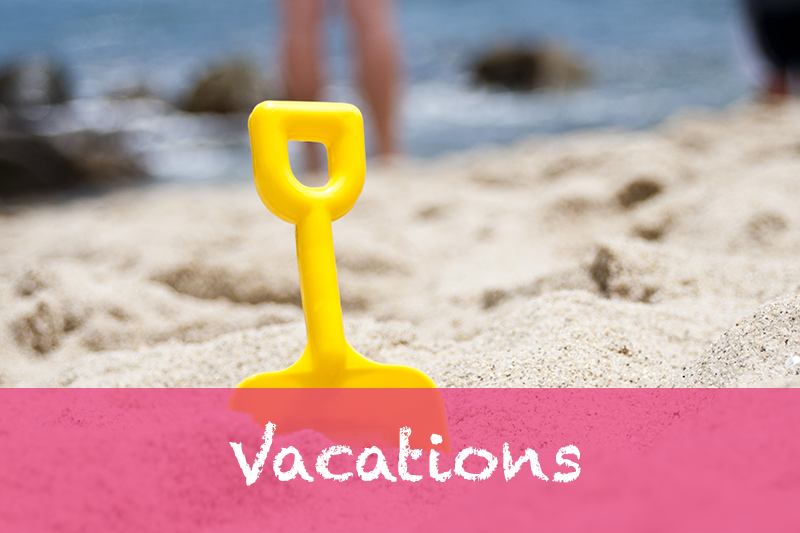
<style>
.page{position:relative;width:800px;height:533px}
.page>*{position:absolute;margin:0}
.t1{font:66.5px "Chalkduster";color:#ffffff}
</style>
<div class="page">
<p class="t1" style="left:229px;top:421px;width:352px;height:65px">Vacations</p>
</div>
